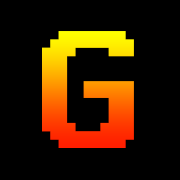
<style>
.page{position:relative;width:180px;height:180px;background:#000000}
.page>*{position:absolute;margin:0}
.t1{font:150px "KindlyRewind";letter-spacing:-0.02em}
</style>
<div class="page">
<p class="t1" style="left:42px;top:31px;width:92px;height:117px">G</p>
</div>
